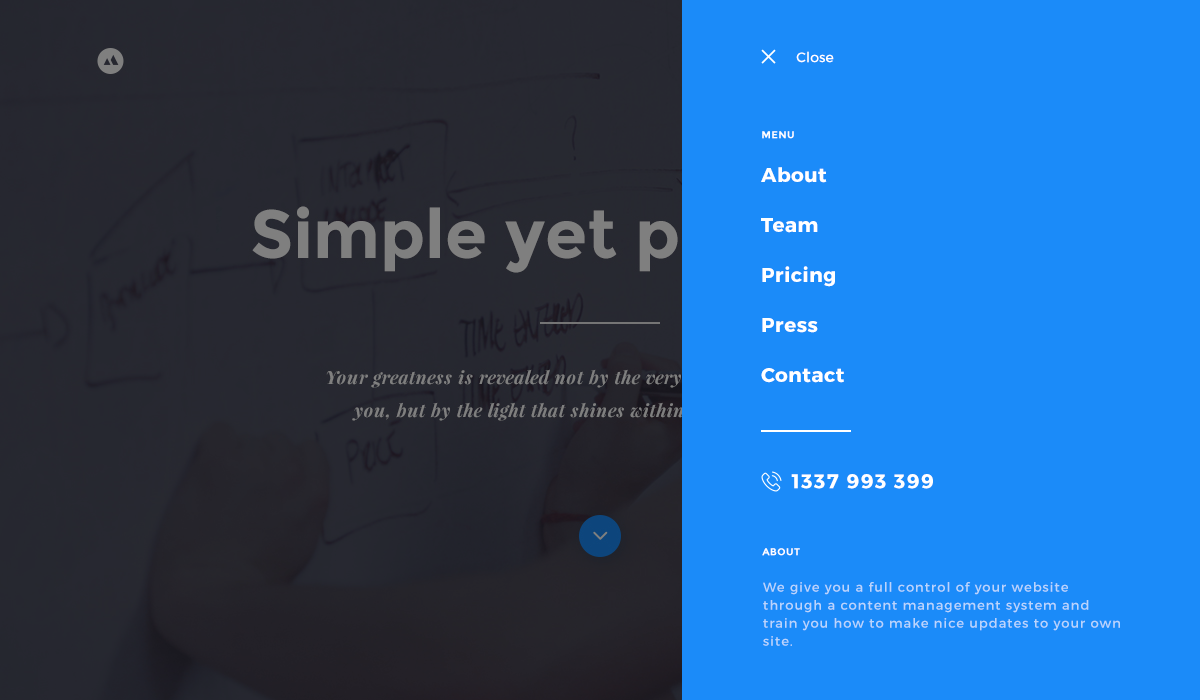
<style>
.page{position:relative;width:1200px;height:700px;background:#1b8bf9}
.page>*{position:absolute;margin:0}
.t1{font:14px "Montserrat-Regular";color:#ffffff}
.t2{font:10px "Montserrat-Bold";letter-spacing:0.04em;color:#ffffff;text-transform:uppercase}
.t3{font:20px/50px "Montserrat-Bold";letter-spacing:0.025em;color:#ffffff}
.t4{font:20px "Montserrat-Bold";letter-spacing:0.08em;color:#ffffff}
.t5{font:13px/18px "Montserrat-Regular";letter-spacing:0.08em;color:#bad5fc}
</style>
<div class="page">
<p class="t1" style="left:796px;top:51px;width:38px;height:12px">Close</p>
<p class="t2" style="left:762px;top:131px;width:32px;height:8px">Menu</p>
<p class="t3" style="left:761px;top:167px;width:83px;height:216px">About<br>Team<br>Pricing<br>Press<br>Contact</p>
<p class="t4" style="left:791px;top:474px;width:142px;height:15px">1337 993 399</p>
<p class="t2" style="left:762px;top:548px;width:38px;height:8px">About</p>
<p class="t5" style="left:763px;top:582px;width:357px;height:64px">We give you a full control of your website through a content management system and train you how to make nice updates to your own site.</p>
</div>
